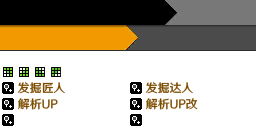
<style>
.page{position:relative;width:256px;height:128px;background:#ffffff}
.page>*{position:absolute;margin:0}
.t1{font:12px "HYWenHei-FEW";letter-spacing:-0.015em;color:#7c4b00}
</style>
<div class="page">
<p class="t1" style="left:17px;top:82px;width:48px;height:12px">发掘匠人</p>
<p class="t1" style="left:145px;top:82px;width:48px;height:12px">发掘达人</p>
<p class="t1" style="left:18px;top:98px;width:40px;height:12px">解析UP</p>
<p class="t1" style="left:146px;top:98px;width:52px;height:12px">解析UP改</p>
</div>
